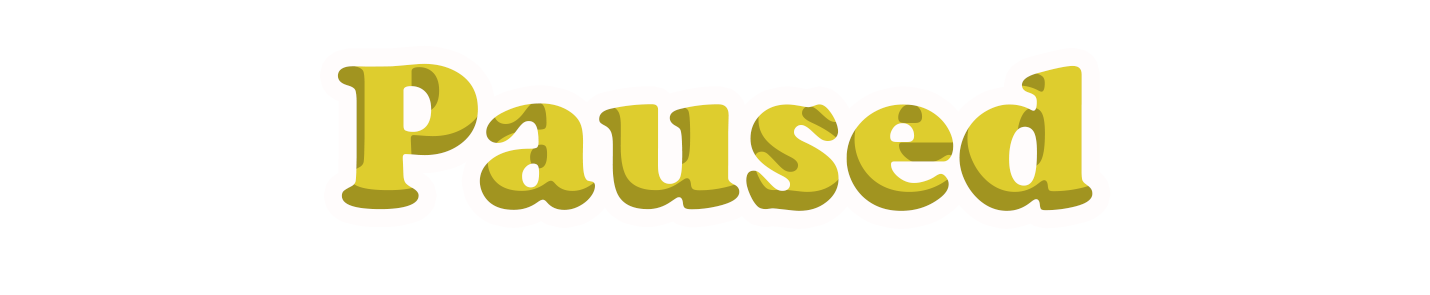
<style>
.page{position:relative;width:1430px;height:295px;background:#ffffff}
.page>*{position:absolute;margin:0}
.t1{font:213px "CooperBlack";color:#decd2e}
</style>
<div class="page">
<p class="t1" style="left:337px;top:63px;width:756px;height:148px">Paused</p>
</div>
